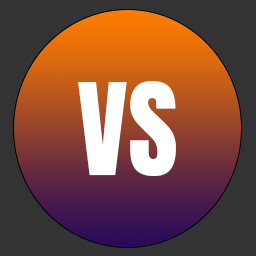
<style>
.page{position:relative;width:256px;height:256px;background:#333333}
.page>*{position:absolute;margin:0}
.t1{font:108.3px "Anton-Regular";letter-spacing:0.001em;color:#ffffff}
</style>
<div class="page">
<p class="t1" style="left:78px;top:81px;width:98px;height:95px">VS</p>
</div>
